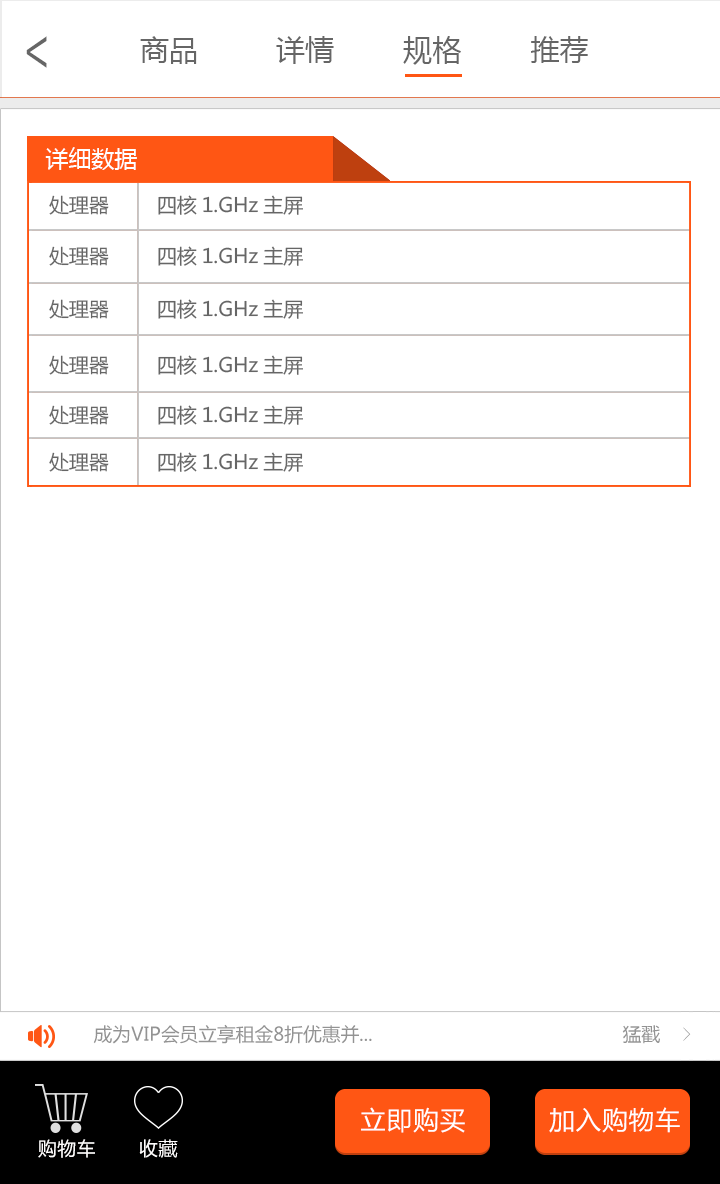
<style>
.page{position:relative;width:720px;height:1184px;background:#ffffff}
.page>*{position:absolute;margin:0}
.t1{font:51.9px "AdobeHeitiStd-Regular";color:#666666;scale:0.72 1}
.t2{font:29.2px "MicrosoftYaHei";color:#666666}
.t3{font:22.9px "MicrosoftYaHei";color:#ffffff}
.t4{font:19.8px "MicrosoftYaHei";color:#666666}
.t5{font:18.8px "MicrosoftYaHei";color:#939393}
.t6{font:18.8px "SimSun";color:#939393}
.t7{font:25.5px "MicrosoftYaHei";letter-spacing:0.035em;color:#fffefe}
.t8{font:18.8px "MicrosoftYaHei";letter-spacing:0.035em;color:#fffefe}
</style>
<div class="page">
<p class="t1" style="left:26px;top:36px;width:21px;height:32px;rotate:180deg">&gt;</p>
<p class="t2" style="left:140px;top:36px;width:448px;height:29px">商品         详情        规格        推荐</p>
<p class="t3" style="left:45px;top:147px;width:92px;height:23px">详细数据</p>
<p class="t4" style="left:49px;top:195px;width:60px;height:20px">处理器</p>
<p class="t4" style="left:158px;top:195px;width:145px;height:20px">四核1.GHz主屏</p>
<p class="t4" style="left:49px;top:246px;width:60px;height:20px">处理器</p>
<p class="t4" style="left:158px;top:246px;width:145px;height:20px">四核1.GHz主屏</p>
<p class="t4" style="left:49px;top:299px;width:60px;height:20px">处理器</p>
<p class="t4" style="left:158px;top:299px;width:145px;height:20px">四核1.GHz主屏</p>
<p class="t4" style="left:49px;top:355px;width:60px;height:20px">处理器</p>
<p class="t4" style="left:158px;top:355px;width:145px;height:20px">四核1.GHz主屏</p>
<p class="t4" style="left:49px;top:405px;width:60px;height:20px">处理器</p>
<p class="t4" style="left:158px;top:405px;width:145px;height:20px">四核1.GHz主屏</p>
<p class="t4" style="left:49px;top:452px;width:60px;height:20px">处理器</p>
<p class="t4" style="left:158px;top:452px;width:145px;height:20px">四核1.GHz主屏</p>
<p class="t5" style="left:93px;top:1024px;width:598px;height:20px">成为VIP会员立享租金8折优惠并...                                             猛戳    <span class="t6">&gt;</span></p>
<p class="t7" style="left:361px;top:1107px;width:104px;height:26px">立即购买</p>
<p class="t7" style="left:549px;top:1107px;width:131px;height:26px">加入购物车</p>
<p class="t8" style="left:38px;top:1139px;width:57px;height:19px">购物车</p>
<p class="t8" style="left:139px;top:1139px;width:39px;height:19px">收藏</p>
</div>
